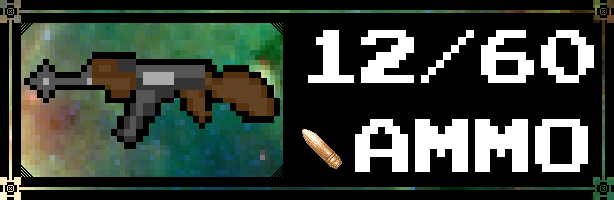
<style>
.page{position:relative;width:614px;height:200px;background:#000000}
.page>*{position:absolute;margin:0}
.t1{font:60px "PressStart2P";color:#ffffff}
</style>
<div class="page">
<p class="t1" style="left:308px;top:30px;width:286px;height:53px">12/60</p>
<p class="t1" style="left:355px;top:119px;width:233px;height:53px">AMMO</p>
</div>
